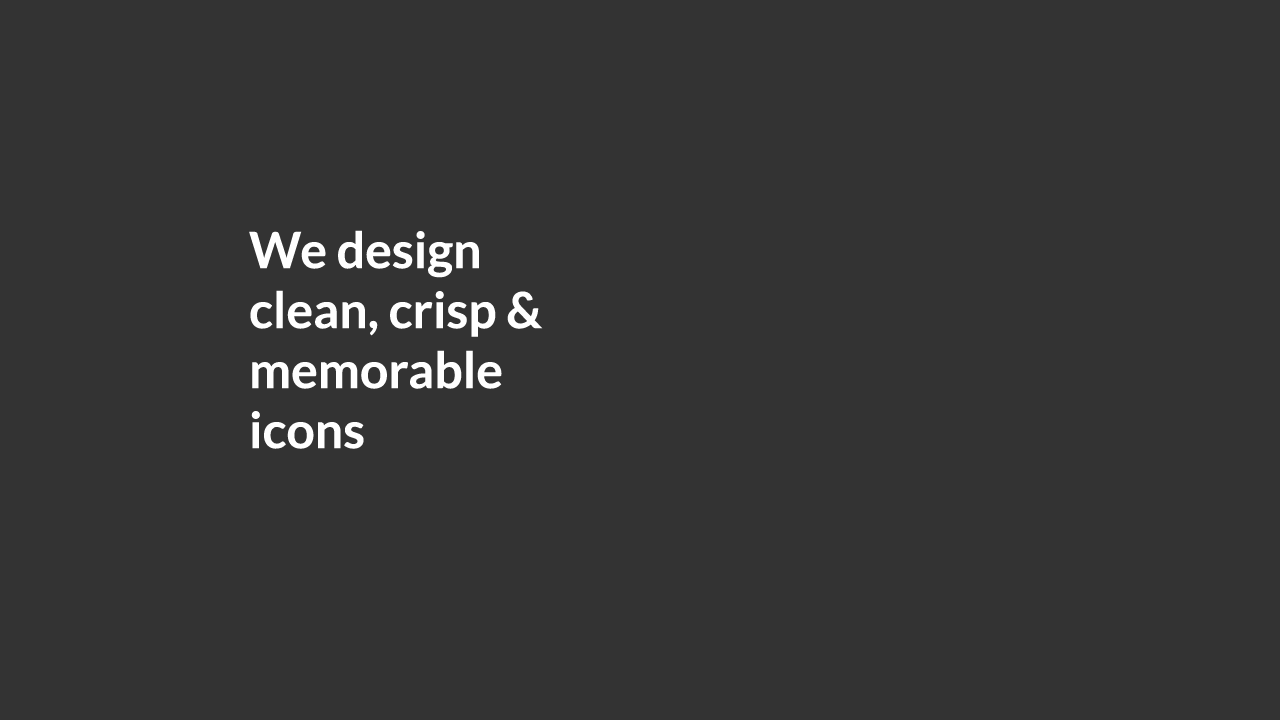
<style>
.page{position:relative;width:1280px;height:720px;background:#333333}
.page>*{position:absolute;margin:0}
.t1{font:50px "Lato-Bold";color:#ffffff}
</style>
<div class="page">
<p class="t1" style="left:249px;top:230px;width:294px;height:219px">We design clean, crisp &amp; memorable icons</p>
</div>
